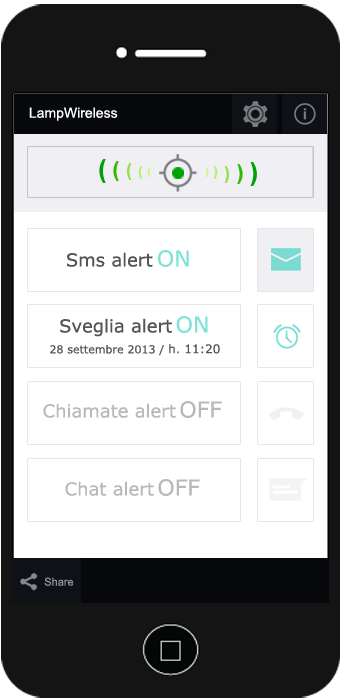
<style>
.page{position:relative;width:350px;height:700px;background:#ffffff}
.page>*{position:absolute;margin:0}
.t1{font:14px "ArialMT";color:#ffffff}
.t2{font:26px "Arial-BoldMT";color:#00a007}
.t3{font:22px "Arial-BoldMT";color:#32b801}
.t4{font:18px "Arial-BoldMT";color:#94e049}
.t5{font:14px "Arial-BoldMT";color:#b3f262}
.t6{font:10px "Arial-BoldMT";color:#c3fb71}
.t7{font:18px "Verdana";color:#555555}
.t8{font:22px "Verdana";color:#81e2d6}
.t9{font:18px "Verdana";color:#b9b9b9}
.t10{font:22px "Verdana";color:#b9b9b9}
.t11{font:11px "ArialMT";color:#909194}
</style>
<div class="page">
<p class="t1" style="left:29px;top:107px;width:89px;height:14px">LampWireless</p>
<p class="t2" style="left:99px;top:159px;width:7px;height:24px">(</p>
<p class="t3" style="left:113px;top:161px;width:6px;height:20px">(</p>
<p class="t4" style="left:127px;top:163px;width:5px;height:17px">(</p>
<p class="t5" style="left:138px;top:166px;width:5px;height:13px">(</p>
<p class="t6" style="left:147px;top:168px;width:4px;height:9px">(</p>
<p class="t6" style="left:205px;top:168px;width:4px;height:9px;rotate:-180deg">(</p>
<p class="t5" style="left:213px;top:166px;width:5px;height:13px;rotate:-180deg">(</p>
<p class="t4" style="left:224px;top:166px;width:5px;height:17px;rotate:-180deg">(</p>
<p class="t3" style="left:237px;top:164px;width:6px;height:20px;rotate:-180deg">(</p>
<p class="t2" style="left:250px;top:162px;width:7px;height:24px;rotate:-180deg">(</p>
<p class="t7" style="left:67px;top:250px;width:122px;height:17px">Sms alert <span class="t8">ON</span></p>
<p class="t7" style="left:60px;top:316px;width:148px;height:21px">Sveglia alert <span class="t8">ON</span></p>
<p class="t9" style="left:43px;top:401px;width:179px;height:17px">Chiamate alert <span class="t10">OFF</span></p>
<p class="t9" style="left:65px;top:479px;width:135px;height:17px">Chat alert <span class="t10">OFF</span></p>
<p class="t11" style="left:44px;top:577px;width:30px;height:9px">Share</p>
</div>
